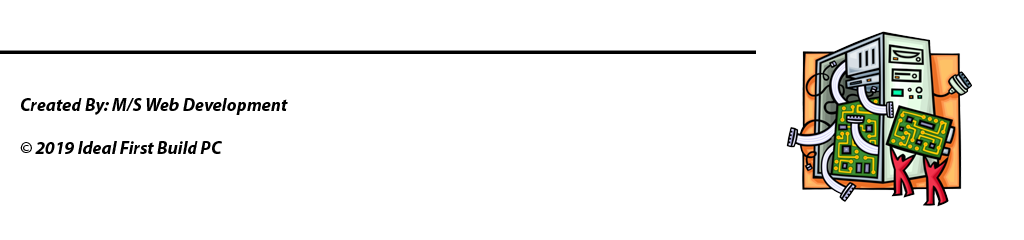
<style>
.page{position:relative;width:1024px;height:240px;background:#ffffff}
.page>*{position:absolute;margin:0}
.t1{font:18px "MyriadPro-BoldIt";color:#000000}
.t2{font:24px "MyriadPro-Bold";color:#000000}
.t3{font:72px "MyriadPro-Bold";color:#000000}
</style>
<div class="page">
<p class="t1" style="left:0px;top:50px;width:756px;height:104px"><span class="t2"><br></span><span class="t3">_____________________<br><br></span><br>      Created By: M/S Web Development<br><br>      © 2019 Ideal First Build PC</p>
</div>
